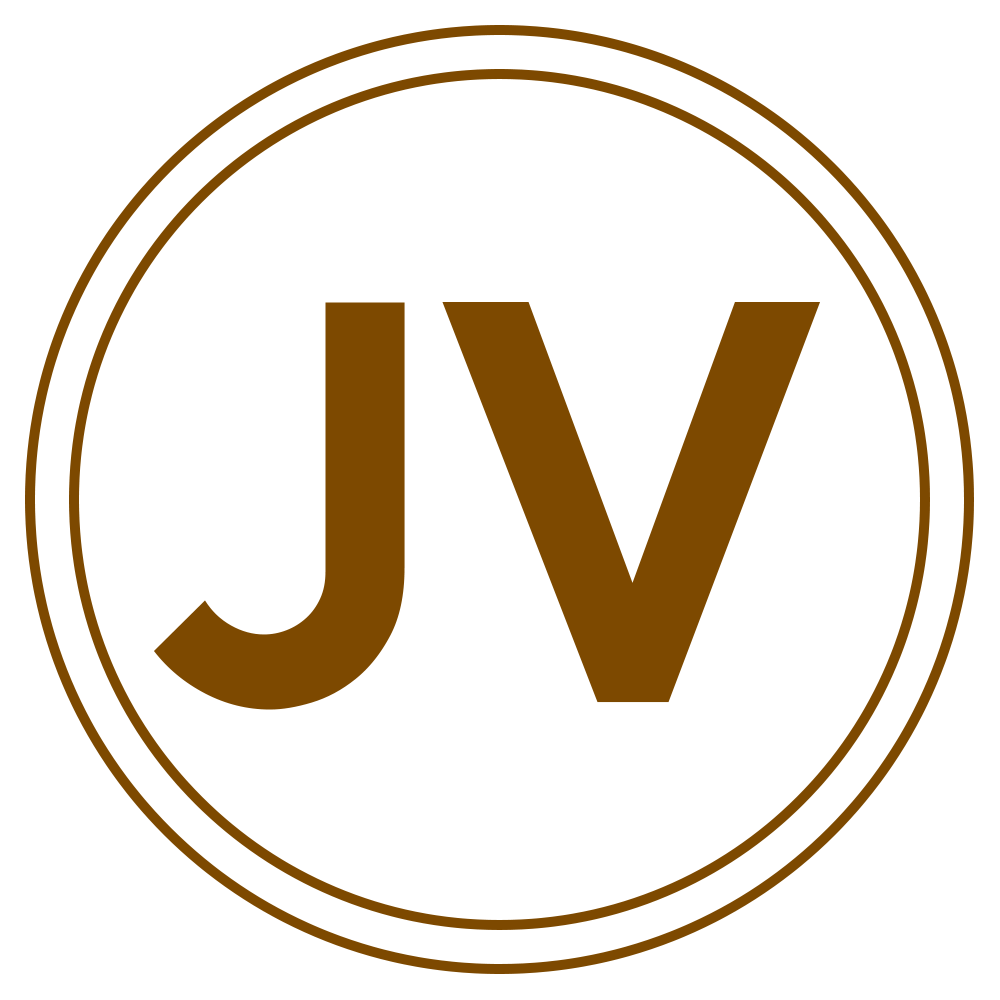
<style>
.page{position:relative;width:1000px;height:1000px;background:#ffffff}
.page>*{position:absolute;margin:0}
.t1{font:500px "KeepCalm-Medium";color:#7d4900}
</style>
<div class="page">
<p class="t1" style="left:154px;top:302px;width:666px;height:408px">JV</p>
</div>
